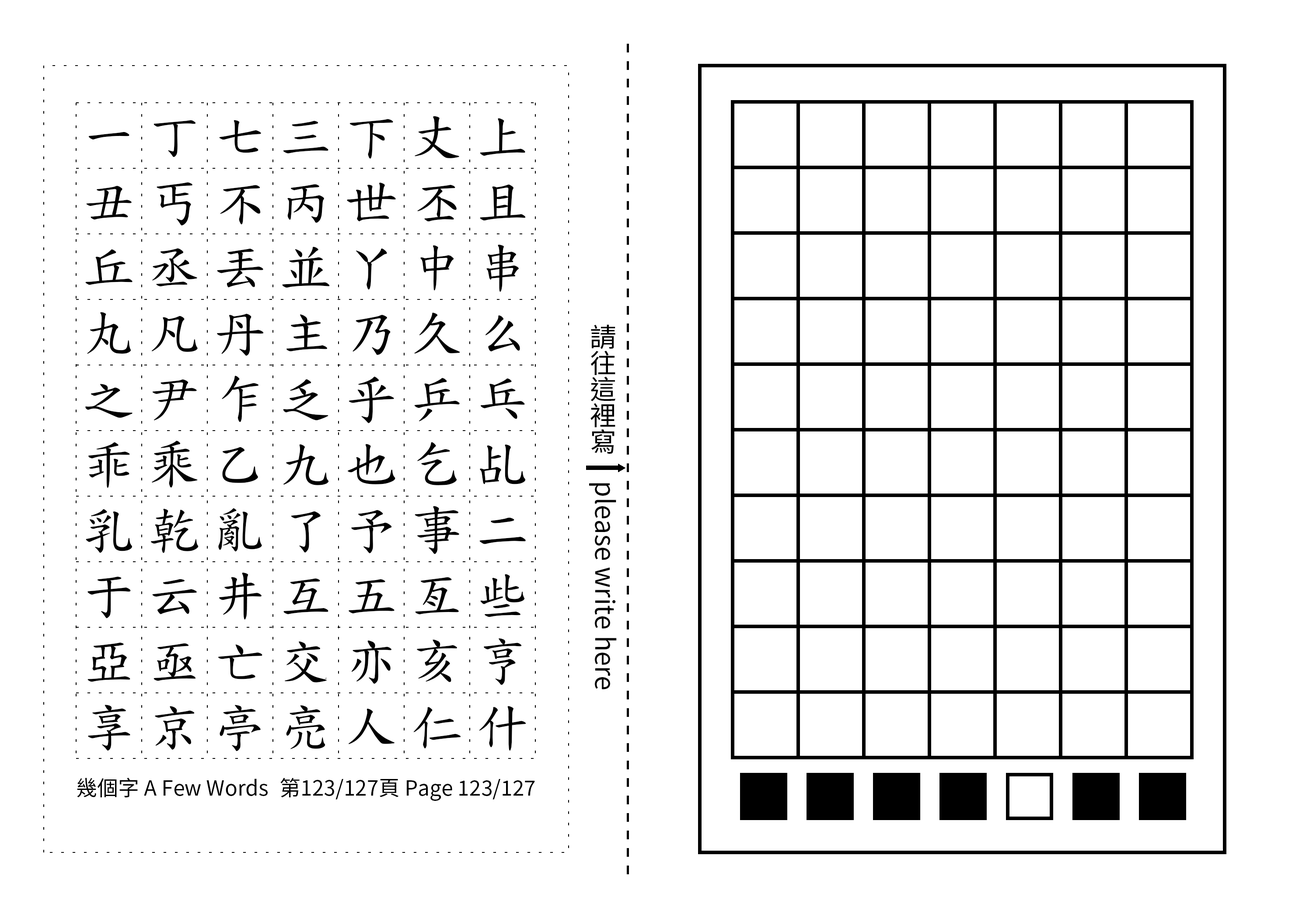
<style>
.page{position:relative;width:1299px;height:918px;background:#ffffff}
.page>*{position:absolute;margin:0}
.t1{font:52.5px/65.6px "TW-Kai-98_1";letter-spacing:0.25em;color:#000000}
.t2{font:26.2px "SourceHanSansTC-Regular";color:#000000}
.t3{font:21px "SourceHanSansTC-Regular";color:#000000}
</style>
<div class="page">
<p class="t1" style="left:85px;top:116px;width:441px;height:636px;text-align:center">一丁七三下丈上丑丐不丙世丕且丘丞丟並丫中串丸凡丹主乃久么之尹乍乏乎乒乓乖乘乙九也乞乩乳乾亂了予事二于云井互五亙些亞亟亡交亦亥亨享京亭亮人仁什</p>
<p class="t2" style="left:589px;top:324px;width:28px;height:366px;text-align:center">請往這裡寫　please write here</p>
<p class="t3" style="left:77px;top:778px;width:191px;height:20px">幾個字 A Few Words</p>
<p class="t3" style="left:280px;top:778px;width:255px;height:23px">第123/127頁 Page 123/127</p>
</div>
